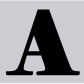
<style>
.page{position:relative;width:84px;height:84px;background:#cbcdd3}
.page>*{position:absolute;margin:0}
.t1{font:86.3px "Elephant-Regular";color:#000000;font-weight:bold}
</style>
<div class="page">
<p class="t1" style="left:6px;top:9px;width:74px;height:67px">A</p>
</div>
